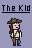
<style>
.page{position:relative;width:32px;height:48px;background:#9998ba}
.page>*{position:absolute;margin:0}
.t1{font:7.7px "Krungthep";color:#020116;text-decoration:underline}
</style>
<div class="page">
<p class="t1" style="left:1px;top:5px;width:31px;height:8px">The Kid</p>
</div>
